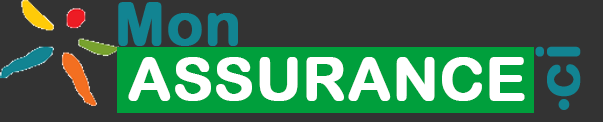
<style>
.page{position:relative;width:603px;height:122px;background:#333333}
.page>*{position:absolute;margin:0}
.t1{font:60px "ArialRoundedMTBold";color:#128492;font-weight:bold}
.t2{font:60px "ArialRoundedMTBold";color:#ffffff;font-weight:bold}
.t3{font:90px "BaskOldFace";color:#128492}
</style>
<div class="page">
<p class="t1" style="left:118px;top:2px;width:120px;height:44px">Mon</p>
<p class="t1" style="left:535px;top:46px;width:46px;height:51px;rotate:-90deg">ci</p>
<p class="t2" style="left:128px;top:57px;width:397px;height:44px">ASSURANCE</p>
<p class="t3" style="left:558px;top:99px;width:12px;height:11px">.</p>
</div>
